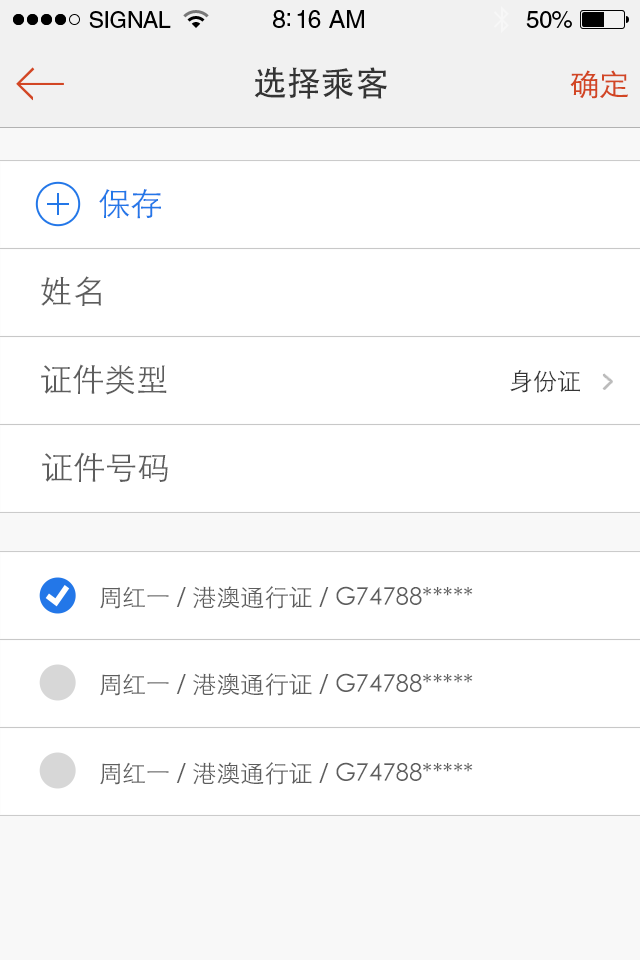
<style>
.page{position:relative;width:640px;height:960px;background:#ffffff}
.page>*{position:absolute;margin:0}
.t1{font:34px "STHeitiSC-Medium";color:#343434}
.t2{font:30px "STHeitiSC-Light";color:#d24624}
.t3{font:32px "STHeitiSC-Light";color:#2377e8}
.t4{font:32px "STHeitiSC-Light";color:#5d5d5d}
.t5{font:24px "STHeitiSC-Light";color:#343434}
.t6{font:24px "STHeitiSC-Light";color:#5d5d5d}
</style>
<div class="page">
<p class="t1" style="left:254px;top:67px;width:133px;height:32px">选择乘客</p>
<p class="t2" style="left:570px;top:70px;width:58px;height:29px">确定</p>
<p class="t3" style="left:99px;top:189px;width:62px;height:30px">保存</p>
<p class="t4" style="left:41px;top:276px;width:60px;height:30px">姓名</p>
<p class="t4" style="left:41px;top:364px;width:126px;height:31px">证件类型</p>
<p class="t5" style="left:510px;top:370px;width:70px;height:23px">身份证</p>
<p class="t4" style="left:42px;top:452px;width:126px;height:30px">证件号码</p>
<p class="t6" style="left:100px;top:586px;width:373px;height:23px">周红一 / 港澳通行证 / G74788*****</p>
<p class="t6" style="left:100px;top:673px;width:373px;height:23px">周红一 / 港澳通行证 / G74788*****</p>
<p class="t6" style="left:100px;top:762px;width:373px;height:23px">周红一 / 港澳通行证 / G74788*****</p>
</div>
